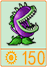
<style>
.page{position:relative;width:47px;height:67px;background:#ccead0}
.page>*{position:absolute;margin:0}
.t1{font:20.2px "SimHei";letter-spacing:-0.1em;color:#ff9c00;scale:0.84 1}
.t2{font:20.2px "SimHei";letter-spacing:0.025em;color:#ff9c00;scale:0.84 1}
.t3{font:20.2px "SimHei";letter-spacing:0.2em;color:#ff9c00;scale:0.84 1}
</style>
<div class="page">
<p class="t1" style="left:22px;top:50px;width:23px;height:15px">1<span class="t2">5</span><span class="t3">0</span></p>
</div>
